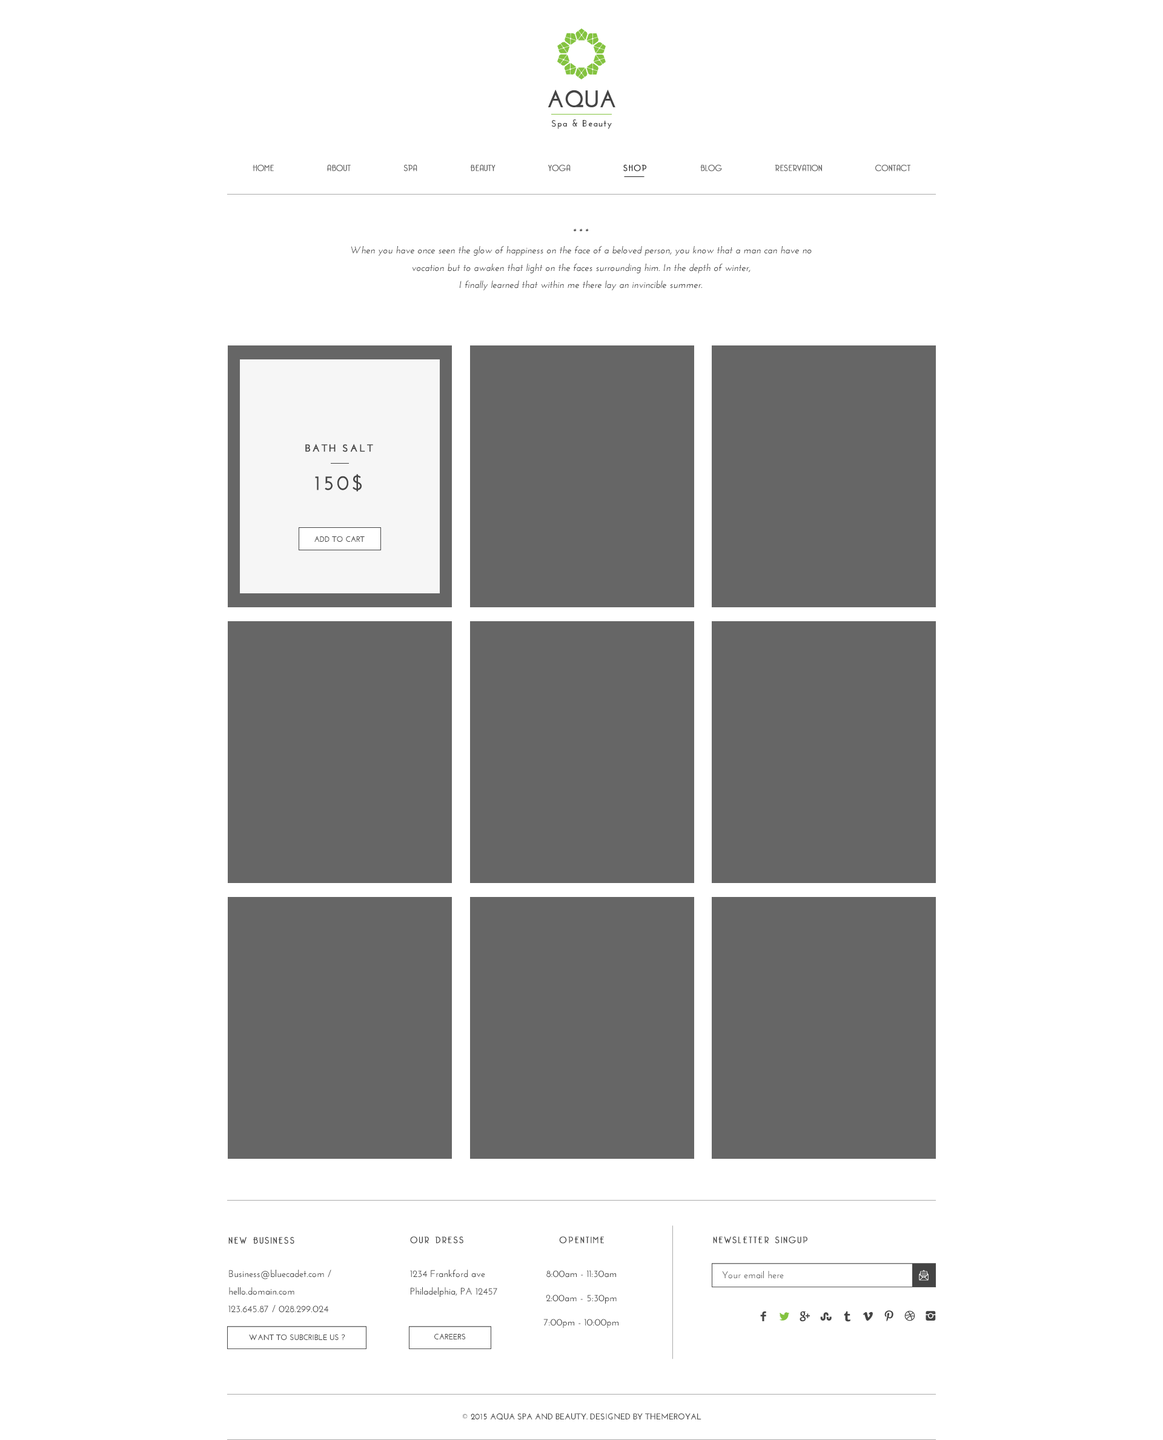
<style>
.page{position:relative;width:1163px;height:1440px;background:#ffffff}
.page>*{position:absolute;margin:0}
.t1{font:8.5px "BelleroseLight";letter-spacing:0.02em;color:#666666;font-weight:bold}
.t2{font:8.5px "BelleroseLight";letter-spacing:0.12em;color:#202020;font-weight:bold}
.t3{font:9.7px/17.5px "JosefinSans-SemiBoldItalic";color:#444444}
.t4{font:10.1px "JosefinSans-Bold";letter-spacing:0.15em;color:#444444;font-weight:bold}
.t5{font:20.2px "JosefinSans-SemiBold";letter-spacing:0.1em;color:#444444;font-weight:bold}
.t6{font:7.9px "JosefinSans-Bold";color:#444444}
.t7{font:9px "BelleroseLight";letter-spacing:0.15em;color:#444444;font-weight:bold}
.t8{font:9.7px/17.5px "JosefinSans-SemiBold";color:#444444}
.t9{font:9.7px/24.2px "JosefinSans-SemiBold";color:#444444}
.t10{font:9.7px "JosefinSans-SemiBold";color:#666666}
.t11{font:8.5px "JosefinSans-Bold";color:#444444}
</style>
<div class="page">
<p class="t1" style="left:253px;top:164px;width:658px;height:7px">HOME          ABOUT          SPA          BEAUTY          YOGA          <span class="t2">SHOP</span>          BLOG          RESERVATION          CONTACT</p>
<p class="t3" style="left:351px;top:228px;width:461px;height:62px;text-align:center">* * *<br>When you have once seen the glow of happiness on the face of a beloved person, you know that a man can have no vocation but to awaken that light on the faces surrounding him. In the depth of winter, <br>I finally learned that within me there lay an invincible summer.</p>
<p class="t4" style="left:305px;top:444px;width:68px;height:8px">BATH SALT</p>
<p class="t5" style="left:315px;top:474px;width:47px;height:17px">150$</p>
<p class="t6" style="left:314px;top:536px;width:51px;height:6px">ADD TO CART</p>
<p class="t7" style="left:228px;top:1237px;width:66px;height:7px">NEW BUSINESS</p>
<p class="t7" style="left:410px;top:1236px;width:54px;height:7px">OUR DRESS</p>
<p class="t7" style="left:559px;top:1236px;width:45px;height:7px">OPENTIME</p>
<p class="t7" style="left:713px;top:1236px;width:95px;height:7px">NEWSLETTER SINGUP</p>
<p class="t8" style="left:228px;top:1269px;width:103px;height:43px">Business@bluecadet.com / hello.domain.com<br>123.645.87 / 028.299.024</p>
<p class="t8" style="left:410px;top:1269px;width:87px;height:28px">1234 Frankford ave <br>Philadelphia, PA 12457</p>
<p class="t9" style="left:544px;top:1270px;width:75px;height:58px;text-align:center">8:00am - 11:30am<br>2:00am - 5:30pm<br>7:00pm - 10:00pm</p>
<p class="t10" style="left:722px;top:1271px;width:62px;height:7px">Your email here</p>
<p class="t6" style="left:249px;top:1334px;width:96px;height:6px">WANT TO SUBCRIBLE US ?</p>
<p class="t6" style="left:434px;top:1333px;width:31px;height:6px">CAREERS</p>
<p class="t11" style="left:463px;top:1412px;width:239px;height:8px">© 2015 AQUA SPA AND BEAUTY. DESIGNED BY THEMEROYAL</p>
</div>
